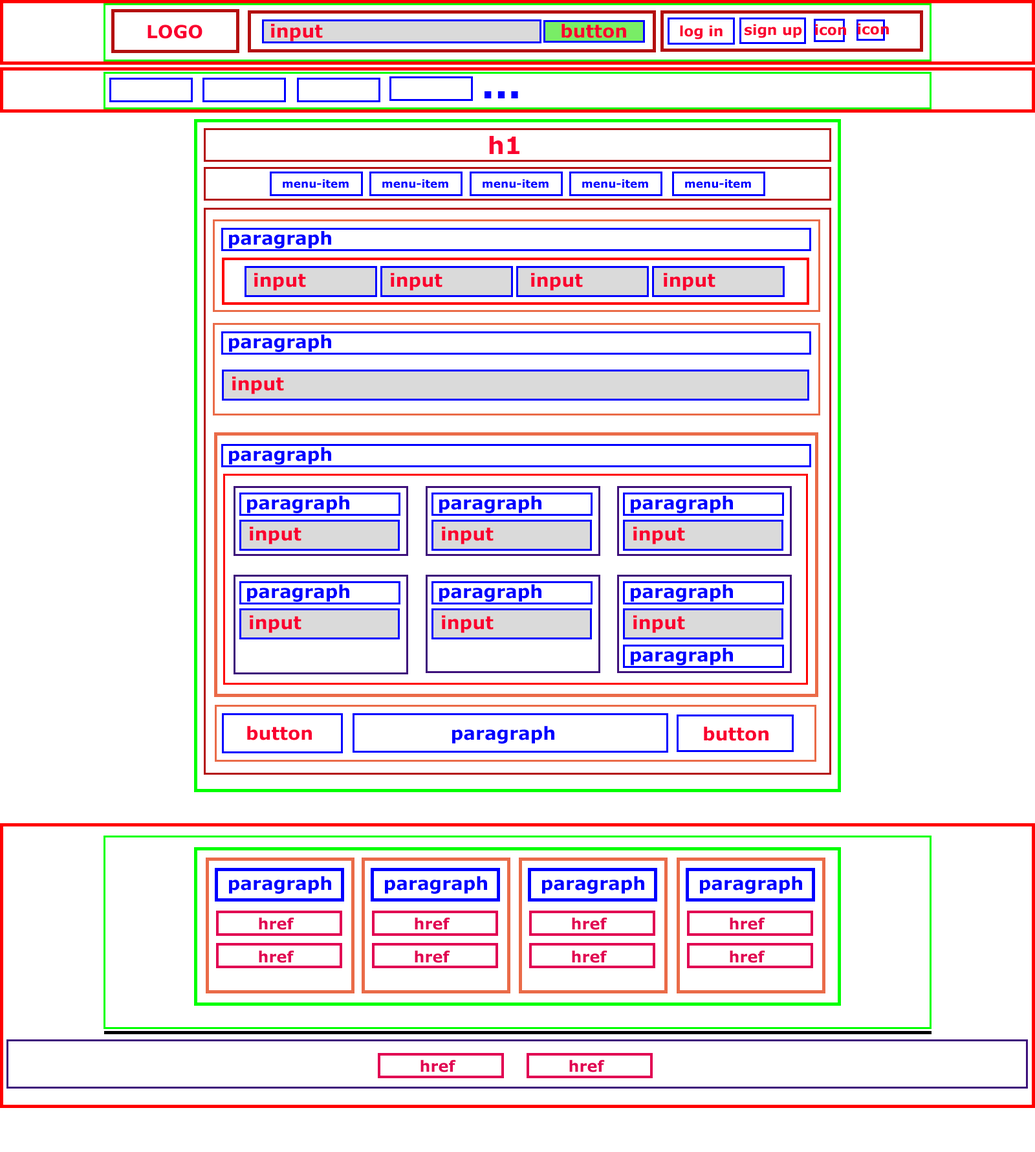
<style>
.page{position:relative;width:1035px;height:1152px;background:#ffffff}
.page>*{position:absolute;margin:0}
.t1{font:18.1px "Verdana-Bold";color:#fa002f}
.t2{font:14.2px "Verdana-Bold";color:#fa002f}
.t3{font:36.9px "Verdana-Bold";color:#0000ff}
.t4{font:23.9px "Verdana-Bold";color:#fa002f}
.t5{font:18.1px "Verdana-Bold";color:#0000ff}
.t6{font:15.5px "Verdana-Bold";color:#e10052}
</style>
<div class="page">
<p class="t1" style="left:148px;top:25px;width:55px;height:14px">LOGO</p>
<p class="t1" style="left:271px;top:23px;width:52px;height:18px">input</p>
<p class="t1" style="left:562px;top:23px;width:64px;height:15px">button</p>
<p class="t2" style="left:680px;top:25px;width:43px;height:14px">log in</p>
<p class="t2" style="left:745px;top:24px;width:57px;height:14px">sign up</p>
<p class="t2" style="left:815px;top:24px;width:31px;height:12px">icon</p>
<p class="t2" style="left:858px;top:23px;width:31px;height:12px">icon</p>
<p class="t3" style="left:485px;top:91px;width:33px;height:7px">...</p>
<p class="t4" style="left:489px;top:136px;width:31px;height:18px">h1</p>
<p class="t5" style="left:229px;top:230px;width:102px;height:18px">paragraph</p>
<p class="t1" style="left:254px;top:272px;width:52px;height:19px">input</p>
<p class="t1" style="left:391px;top:272px;width:52px;height:19px">input</p>
<p class="t1" style="left:531px;top:272px;width:52px;height:19px">input</p>
<p class="t1" style="left:664px;top:272px;width:52px;height:19px">input</p>
<p class="t5" style="left:229px;top:334px;width:102px;height:18px">paragraph</p>
<p class="t1" style="left:232px;top:376px;width:52px;height:18px">input</p>
<p class="t5" style="left:229px;top:446px;width:102px;height:19px">paragraph</p>
<p class="t5" style="left:247px;top:495px;width:102px;height:18px">paragraph</p>
<p class="t5" style="left:439px;top:495px;width:103px;height:18px">paragraph</p>
<p class="t5" style="left:631px;top:495px;width:102px;height:18px">paragraph</p>
<p class="t1" style="left:250px;top:526px;width:52px;height:18px">input</p>
<p class="t1" style="left:442px;top:526px;width:52px;height:18px">input</p>
<p class="t1" style="left:633px;top:526px;width:52px;height:18px">input</p>
<p class="t5" style="left:247px;top:584px;width:102px;height:18px">paragraph</p>
<p class="t5" style="left:439px;top:584px;width:103px;height:18px">paragraph</p>
<p class="t5" style="left:631px;top:584px;width:102px;height:18px">paragraph</p>
<p class="t1" style="left:250px;top:615px;width:52px;height:18px">input</p>
<p class="t1" style="left:442px;top:615px;width:52px;height:18px">input</p>
<p class="t1" style="left:633px;top:615px;width:52px;height:18px">input</p>
<p class="t5" style="left:631px;top:647px;width:102px;height:18px">paragraph</p>
<p class="t1" style="left:247px;top:725px;width:65px;height:15px">button</p>
<p class="t5" style="left:452px;top:725px;width:103px;height:18px">paragraph</p>
<p class="t1" style="left:704px;top:726px;width:65px;height:15px">button</p>
<p class="t5" style="left:229px;top:875px;width:102px;height:19px">paragraph</p>
<p class="t5" style="left:385px;top:875px;width:102px;height:19px">paragraph</p>
<p class="t5" style="left:542px;top:875px;width:102px;height:19px">paragraph</p>
<p class="t5" style="left:700px;top:875px;width:102px;height:19px">paragraph</p>
<p class="t6" style="left:259px;top:917px;width:35px;height:13px">href</p>
<p class="t6" style="left:415px;top:917px;width:35px;height:13px">href</p>
<p class="t6" style="left:572px;top:917px;width:36px;height:13px">href</p>
<p class="t6" style="left:730px;top:917px;width:35px;height:13px">href</p>
<p class="t6" style="left:259px;top:950px;width:35px;height:13px">href</p>
<p class="t6" style="left:415px;top:950px;width:35px;height:13px">href</p>
<p class="t6" style="left:572px;top:950px;width:36px;height:13px">href</p>
<p class="t6" style="left:730px;top:950px;width:35px;height:13px">href</p>
<p class="t6" style="left:421px;top:1059px;width:35px;height:13px">href</p>
<p class="t6" style="left:569px;top:1059px;width:36px;height:13px">href</p>
</div>
